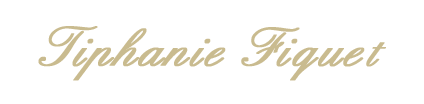
<style>
.page{position:relative;width:424px;height:104px;background:#ffffff}
.page>*{position:absolute;margin:0}
.t1{font:58.1px "English157BT-Regular";color:#c9bb8f;font-weight:bold}
.t2{font:49.8px "English157BT-Regular";color:#c9bb8f;font-weight:bold}
</style>
<div class="page">
<p class="t1" style="left:38px;top:26px;width:348px;height:55px">Tiphanie Fique<span class="t2">t</span></p>
</div>
